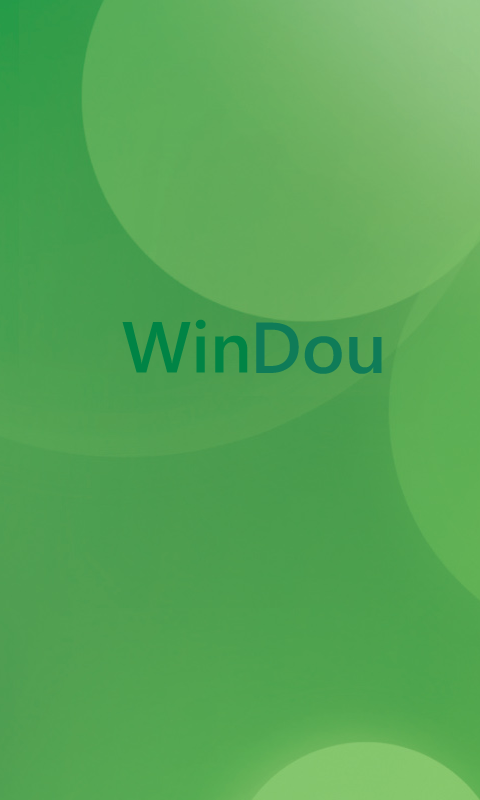
<style>
.page{position:relative;width:480px;height:800px}
.page>*{position:absolute;margin:0}
.t1{font:72px "ZegoeUISemiBold";color:#008445}
.t2{font:72px "ZegoeUISemiBold";color:#0f7c58}
</style>
<div class="page">
<p class="t1" style="left:122px;top:319px;width:126px;height:54px">Win</p>
<p class="t2" style="left:256px;top:322px;width:126px;height:52px">Dou</p>
</div>
